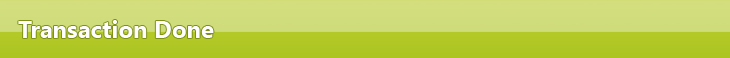
<style>
.page{position:relative;width:730px;height:58px}
.page>*{position:absolute;margin:0}
.t1{font:24px "SegoeUI-Bold";color:#fefefe}
</style>
<div class="page">
<p class="t1" style="left:18px;top:20px;width:196px;height:18px">Transaction Done</p>
</div>
